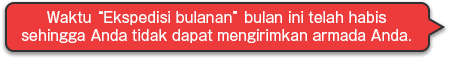
<style>
.page{position:relative;width:450px;height:58px;background:#ed3b3b}
.page>*{position:absolute;margin:0}
.t1{font:14px/18px "GothicMB101Pro-Regular";color:#ffffff}
</style>
<div class="page">
<p class="t1" style="left:21px;top:11px;width:390px;height:32px;text-align:center">Waktu “Ekspedisi bulanan” bulan ini telah habis<br>sehingga Anda tidak dapat mengirimkan armada Anda.</p>
</div>
